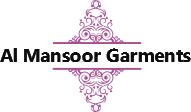
<style>
.page{position:relative;width:191px;height:112px;background:#ffffff}
.page>*{position:absolute;margin:0}
.t1{font:18.7px "MicrosoftPhagsPa-Bold";color:#0f0e0e}
</style>
<div class="page">
<p class="t1" style="left:0px;top:48px;width:191px;height:14px">Al Mansoor Garments</p>
</div>
